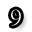
<style>
.page{position:relative;width:32px;height:32px;background:#ffffff}
.page>*{position:absolute;margin:0}
.t1{font:21.3px "MingLiU";letter-spacing:0.005em;color:#ffffff;scale:1.13 1}
</style>
<div class="page">
<p class="t1" style="left:11px;top:9px;width:10px;height:17px">9</p>
</div>
